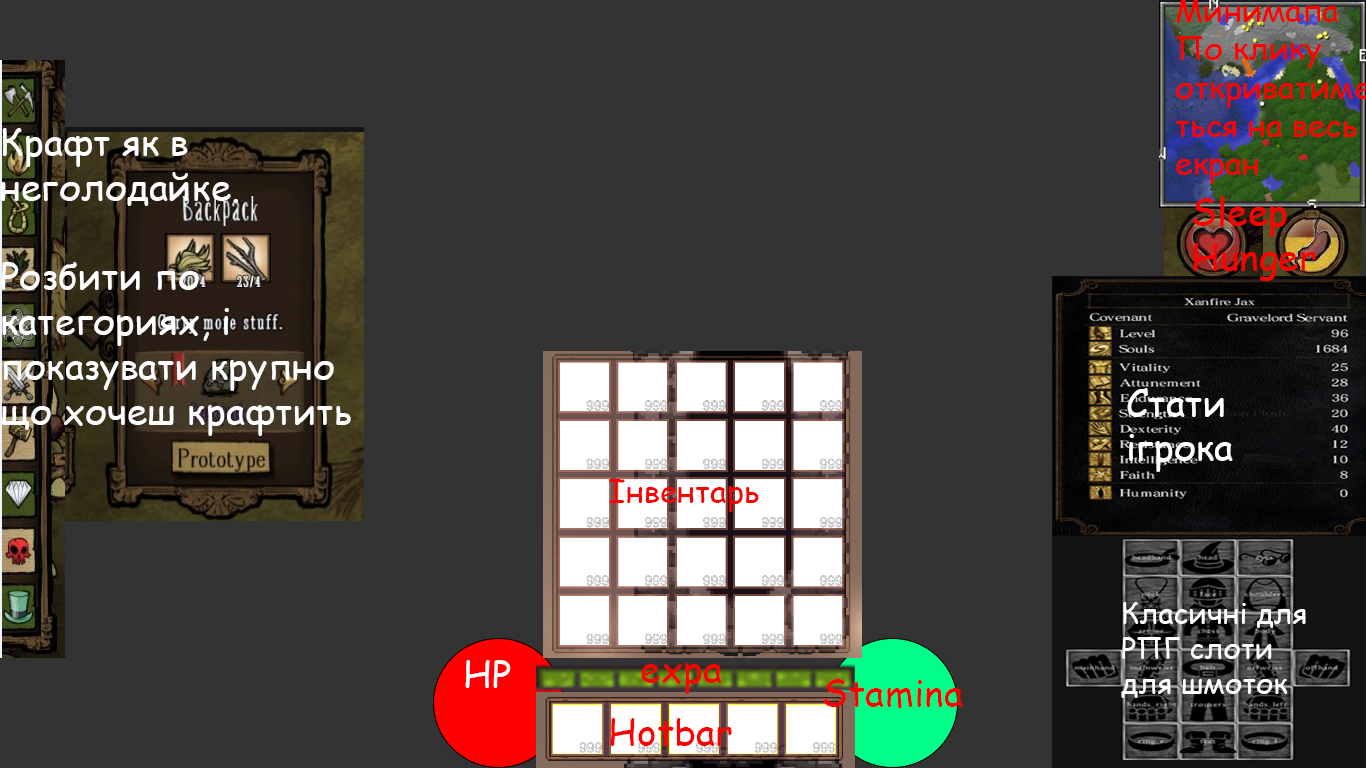
<style>
.page{position:relative;width:1366px;height:768px;background:#333333}
.page>*{position:absolute;margin:0}
.t1{font:37.3px "ComicSansMS";color:#ffffff}
.t2{font:37.3px "ComicSansMS";color:#ff0000}
.t3{font:32px "ComicSansMS";color:#ff0000}
.t4{font:29.3px "ComicSansMS";color:#ffffff}
</style>
<div class="page">
<p class="t1" style="left:1px;top:128px;width:350px;height:308px">Крафт як в неголодайке.<br><br>Розбити по категориях, і показувати крупно що хочеш крафтить</p>
<p class="t2" style="left:1193px;top:196px;width:123px;height:85px">Sleep <br>Hunger</p>
<p class="t1" style="left:1127px;top:388px;width:106px;height:84px">Стати ігрока</p>
<p class="t3" style="left:609px;top:479px;width:150px;height:33px">Інвентарь</p>
<p class="t4" style="left:1121px;top:602px;width:185px;height:96px">Класичні для РПГ слоти для шмоток</p>
<p class="t1" style="left:465px;top:660px;width:46px;height:28px">HP</p>
<p class="t2" style="left:641px;top:663px;width:81px;height:31px">expa</p>
<p class="t2" style="left:824px;top:679px;width:139px;height:29px">Stamina</p>
<p class="t2" style="left:610px;top:718px;width:122px;height:28px">Hotbar</p>
</div>
